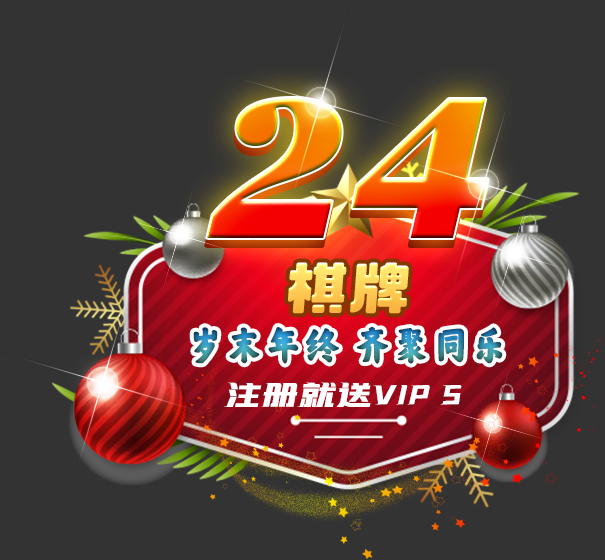
<style>
.page{position:relative;width:605px;height:560px;background:#333333}
.page>*{position:absolute;margin:0}
.t1{font:198.2px "GeorgiaPro-BlackItalic"}
.t2{font:63.7px "zihunxinquhei_trial"}
.t3{font:38.8px "zihun1hao-zhongguozihun-Regular"}
.t4{font:37px "zihun181hao-feichibiaotiti-Regular";color:#ffffff}
</style>
<div class="page">
<p class="t1" style="left:207px;top:98px;width:281px;height:140px">24</p>
<p class="t2" style="left:288px;top:262px;width:121px;height:52px">棋牌</p>
<p class="t3" style="left:193px;top:327px;width:310px;height:37px">岁末年终 齐聚同乐</p>
<p class="t4" style="left:224px;top:382px;width:238px;height:25px">注册就送VIP 5</p>
</div>
